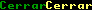
<style>
.page{position:relative;width:92px;height:10px;background:#000000}
.page>*{position:absolute;margin:0}
.t1{font:13.2px "Onesize";color:#009900;scale:0.91 1}
.t2{font:13.2px "Onesize";color:#ffff66;scale:0.91 1}
</style>
<div class="page">
<p class="t1" style="left:0px;top:1px;width:46px;height:8px">Cerrar</p>
<p class="t2" style="left:46px;top:1px;width:46px;height:8px">Cerrar</p>
</div>
